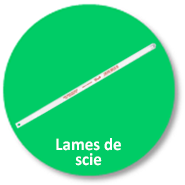
<style>
.page{position:relative;width:185px;height:185px;background:#00cc66}
.page>*{position:absolute;margin:0}
.t1{font:17.8px/15.8px "Calibri-Bold";color:#ffffff;scale:0.96 1}
</style>
<div class="page">
<p class="t1" style="left:56px;top:138px;width:65px;height:28px;text-align:center">Lames de <br>scie</p>
</div>
